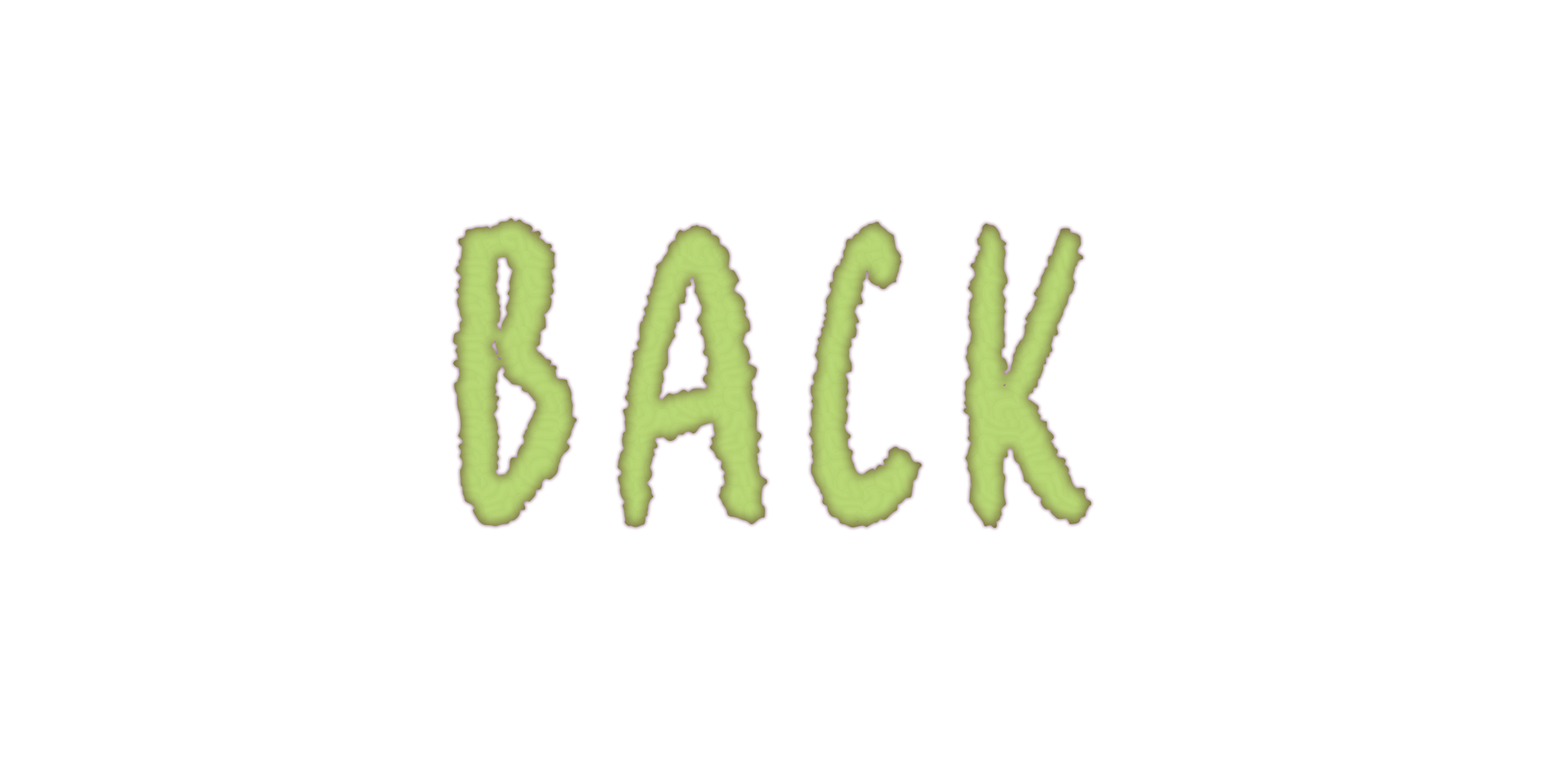
<style>
.page{position:relative;width:1544px;height:772px;background:#ffffff}
.page>*{position:absolute;margin:0}
.t1{font:321.7px "Metalien";letter-spacing:0.1em;color:#b7d974}
</style>
<div class="page">
<p class="t1" style="left:453px;top:218px;width:639px;height:310px">Back</p>
</div>
